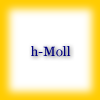
<style>
.page{position:relative;width:100px;height:100px;background:#ffffff}
.page>*{position:absolute;margin:0}
.t1{font:13.3px "Georgia";color:#000080}
</style>
<div class="page">
<p class="t1" style="left:31px;top:46px;width:40px;height:11px">h-Moll</p>
</div>
